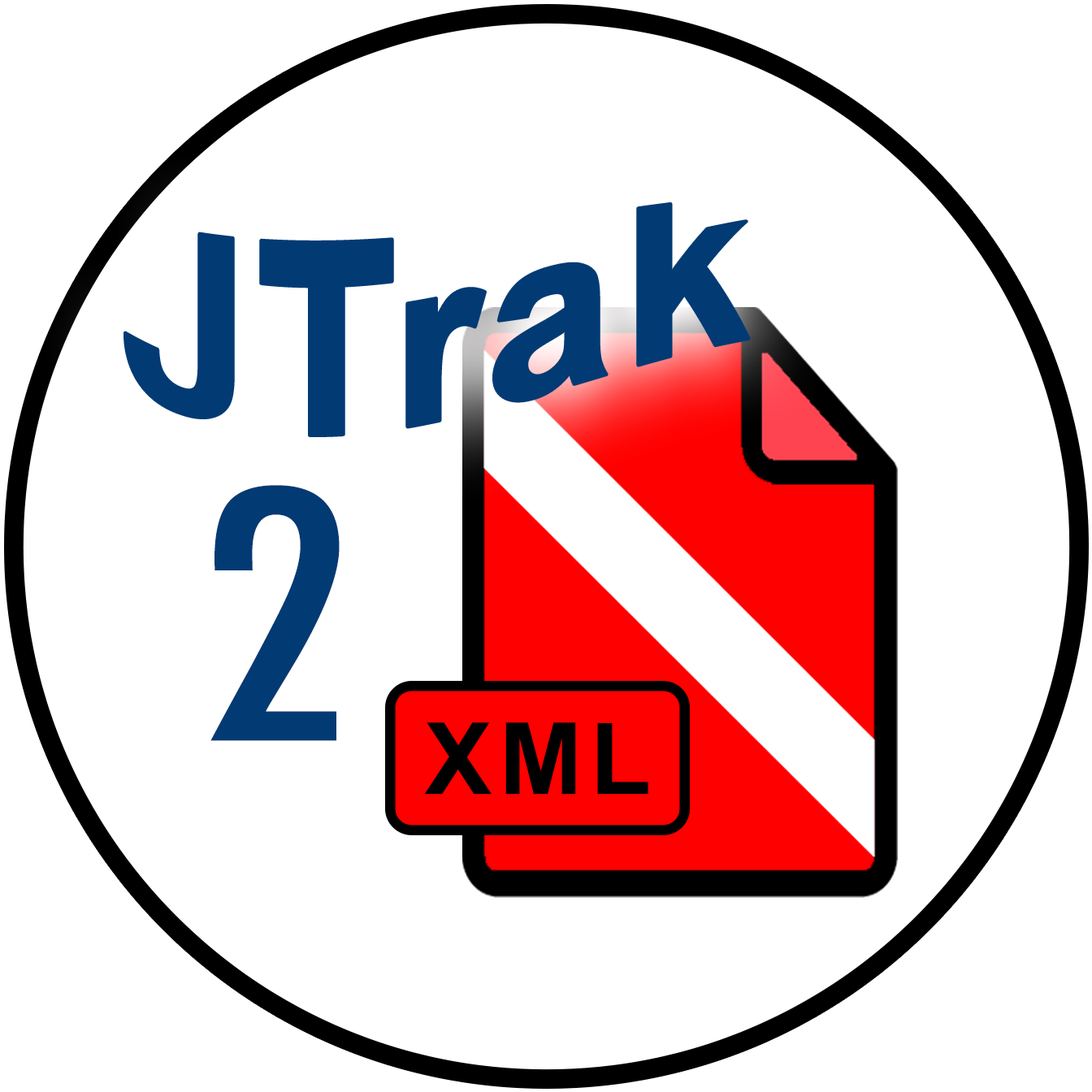
<style>
.page{position:relative;width:1092px;height:1092px;background:#ffffff}
.page>*{position:absolute;margin:0}
.t1{font:232.1px "Arial-BoldMT";letter-spacing:0.025em;color:#023a74}
.t2{font:334.2px "Futura-CondensedMedium";letter-spacing:0.025em;color:#023a74;scale:1.13 1}
.t3{font:99.5px "Arial-BoldMT";letter-spacing:0.075em;color:#000000}
</style>
<div class="page">
<p class="t1" style="left:124px;top:203px;width:625px;height:232px">JTrak</p>
<p class="t2" style="left:210px;top:485px;width:130px;height:256px">2</p>
<p class="t3" style="left:424px;top:722px;width:224px;height:73px">XML</p>
</div>
